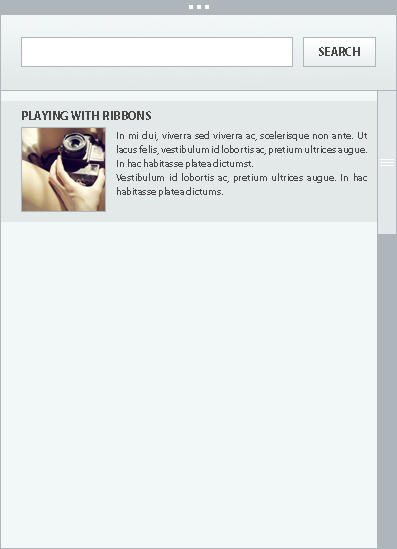
<style>
.page{position:relative;width:397px;height:549px;background:#f2f7f8}
.page>*{position:absolute;margin:0}
.t1{font:12px "MyriadPro-Bold";color:#474747}
.t2{font:10px/14px "MyriadPro-Regular";color:#474747}
</style>
<div class="page">
<p class="t1" style="left:319px;top:47px;width:41px;height:9px">SEARCH</p>
<p class="t1" style="left:22px;top:111px;width:129px;height:9px">PLAYING WITH RIBBONS</p>
<p class="t2" style="left:116px;top:131px;width:251px;height:66px;text-align:justify">In mi dui, viverra sed viverra ac, scelerisque non ante. Ut lacus felis, vestibulum id lobortis ac, pretium ultrices augue. In hac habitasse platea dictumst.<br>Vestibulum id lobortis ac, pretium ultrices augue. In hac habitasse platea dictums.</p>
</div>
